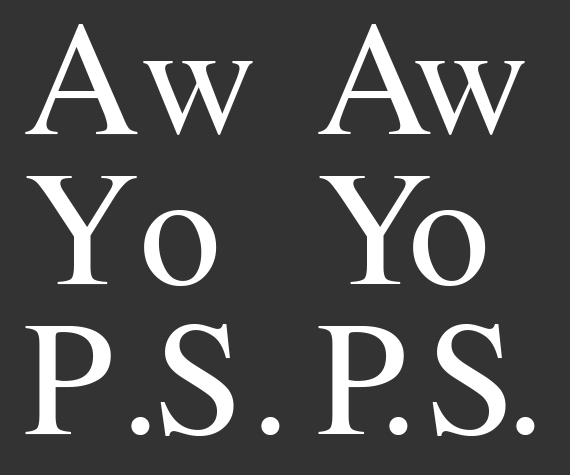
<style>
.page{position:relative;width:570px;height:475px;background:#333333}
.page>*{position:absolute;margin:0}
.t1{font:162px/150px "Times-Roman";color:#ffffff}
</style>
<div class="page">
<p class="t1" style="left:25px;top:24px;width:255px;height:412px">Aw<br>Yo<br>P.S.</p>
<p class="t1" style="left:318px;top:24px;width:217px;height:412px">Aw<br>Yo<br>P.S.</p>
</div>
